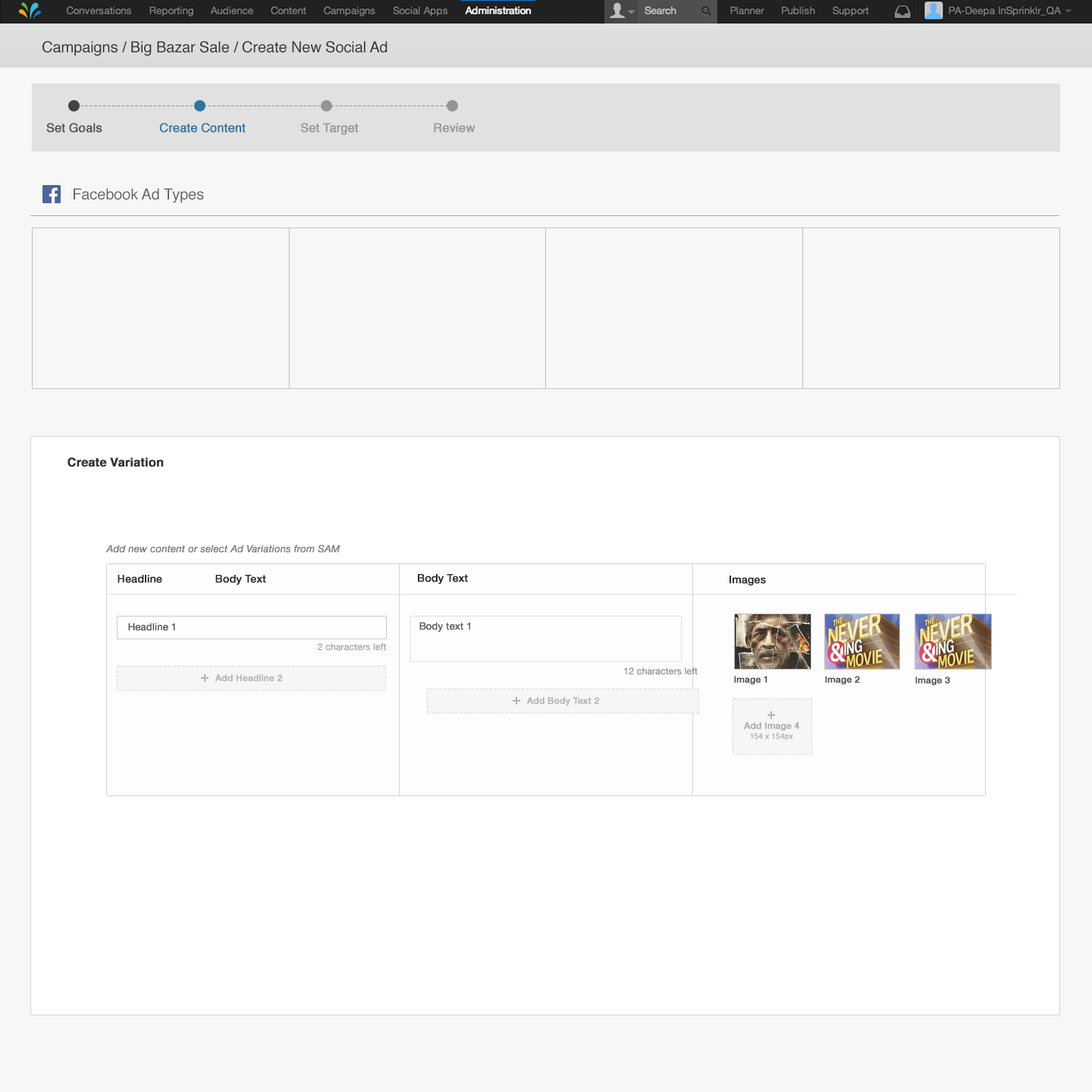
<style>
.page{position:relative;width:1092px;height:1092px;background:#f6f8f8}
.page>*{position:absolute;margin:0}
.t1{font:15.2px "Helvetica";letter-spacing:-0.005em;color:#333333}
.t2{font:12.1px "Helvetica";letter-spacing:-0.005em;color:#505050;font-weight:bold}
.t3{font:12.1px "Helvetica";letter-spacing:-0.005em;color:#2f749d;font-weight:bold}
.t4{font:12.1px "Helvetica";letter-spacing:-0.005em;color:#959595;font-weight:bold}
.t5{font:15.2px "Helvetica";letter-spacing:-0.005em;color:#666666}
.t6{font:12.1px "Helvetica-Bold";letter-spacing:-0.005em;color:#343434;font-weight:bold}
.t7{font:9.9px "HelveticaNeue-Italic";letter-spacing:-0.005em;color:#7f7f7f;font-weight:bold}
.t8{font:10.6px "HelveticaNeue-Medium";letter-spacing:-0.005em;color:#2f2f2f;font-weight:bold}
.t9{font:9.9px "HelveticaNeue";letter-spacing:-0.005em;color:#535353;font-weight:bold}
.t10{font:9.9px "HelveticaNeue";letter-spacing:-0.005em;color:#595959;font-weight:bold}
.t11{font:9.1px "HelveticaNeue";letter-spacing:-0.005em;color:#aaaaaa;font-weight:bold}
.t12{font:9.1px "HelveticaNeue-Medium";letter-spacing:-0.005em;color:#b4b4b4;font-weight:bold}
.t13{font:9.1px "HelveticaNeue";letter-spacing:-0.005em;color:#979797;font-weight:bold}
.t14{font:9.1px "HelveticaNeue-Medium";letter-spacing:-0.005em;color:#505050;font-weight:bold}
.t15{font:9.1px "HelveticaNeue-Medium";letter-spacing:-0.005em;color:#acacac;font-weight:bold}
</style>
<div class="page">
<p class="t1" style="left:42px;top:41px;width:346px;height:15px">Campaigns / Big Bazar Sale / Create New Social Ad</p>
<p class="t2" style="left:46px;top:123px;width:56px;height:10px">Set Goals</p>
<p class="t3" style="left:159px;top:123px;width:87px;height:10px">Create Content</p>
<p class="t4" style="left:301px;top:123px;width:58px;height:12px">Set Target</p>
<p class="t4" style="left:434px;top:123px;width:41px;height:10px">Review</p>
<p class="t5" style="left:74px;top:188px;width:130px;height:15px">Facebook Ad Types</p>
<p class="t6" style="left:67px;top:457px;width:97px;height:10px">Create Variation</p>
<p class="t7" style="left:105px;top:544px;width:235px;height:9px">Add new content or select Ad Variations from SAM</p>
<p class="t8" style="left:118px;top:575px;width:44px;height:8px">Headline</p>
<p class="t8" style="left:215px;top:575px;width:51px;height:10px">Body Text</p>
<p class="t8" style="left:418px;top:574px;width:50px;height:10px">Body Text</p>
<p class="t8" style="left:730px;top:576px;width:36px;height:9px">Images</p>
<p class="t9" style="left:128px;top:623px;width:47px;height:8px">Headline 1</p>
<p class="t10" style="left:419px;top:622px;width:51px;height:10px">Body text 1</p>
<p class="t11" style="left:318px;top:643px;width:69px;height:8px">2 characters left</p>
<p class="t12" style="left:215px;top:674px;width:67px;height:8px">Add Headline 2</p>
<p class="t13" style="left:624px;top:667px;width:74px;height:8px">12 characters left</p>
<p class="t14" style="left:734px;top:676px;width:33px;height:9px">Image 1</p>
<p class="t14" style="left:825px;top:676px;width:35px;height:9px">Image 2</p>
<p class="t14" style="left:915px;top:676px;width:35px;height:10px">Image 3</p>
<p class="t12" style="left:526px;top:697px;width:73px;height:9px">Add Body Text 2</p>
<p class="t15" style="left:744px;top:722px;width:55px;height:9px">Add Image 4</p>
</div>
